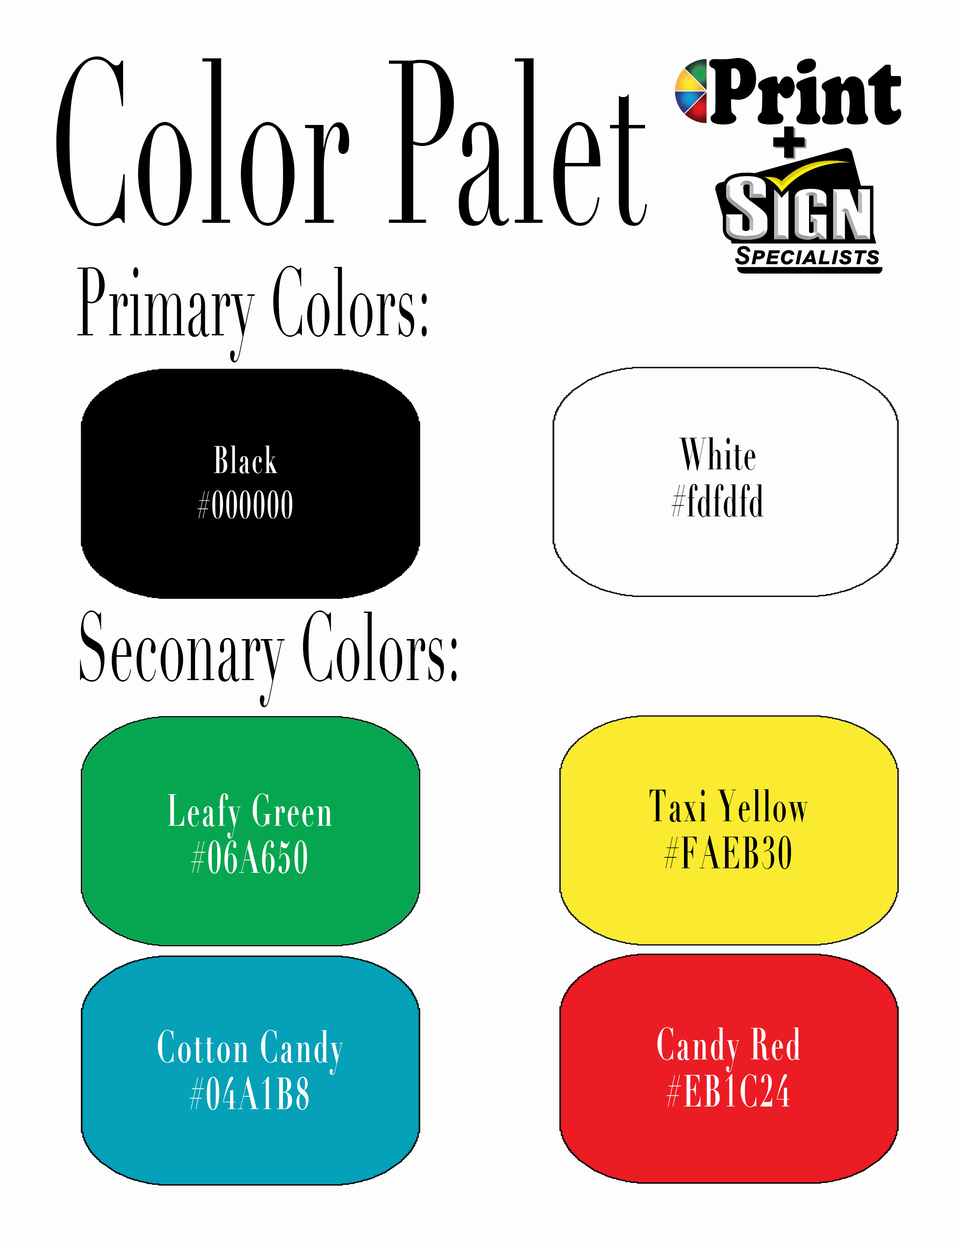
<style>
.page{position:relative;width:960px;height:1242px;background:#fdfdfd}
.page>*{position:absolute;margin:0}
.t1{font:228.1px "Didot";letter-spacing:0.02em;color:#000000;scale:0.5 1}
.t2{font:95px "Didot";letter-spacing:0.02em;color:#000000;scale:0.5 1}
.t3{font:44.4px/47.1px "Didot-Bold";letter-spacing:0.04em;color:#000000;scale:0.57 1}
.t4{font:38px "Didot-Bold";letter-spacing:0.08em;color:#ffffff;scale:0.57 1}
.t5{font:44.4px/47.1px "Didot-Bold";letter-spacing:0.08em;color:#ffffff;scale:0.57 1}
.t6{font:44.4px/47.1px "Didot-Bold";letter-spacing:0.08em;color:#000000;scale:0.57 1}
</style>
<div class="page">
<p class="t1" style="left:56px;top:56px;width:591px;height:170px">Color Palet</p>
<p class="t2" style="left:77px;top:266px;width:350px;height:97px">Primary Colors:</p>
<p class="t3" style="left:671px;top:437px;width:92px;height:80px;text-align:center">White<br>#fdfdfd</p>
<p class="t4" style="left:197px;top:446px;width:95px;height:73px;text-align:center">Black<br><br>#000000</p>
<p class="t2" style="left:80px;top:611px;width:377px;height:96px">Seconary Colors:</p>
<p class="t5" style="left:168px;top:794px;width:164px;height:80px;text-align:center">Leafy Green<br>#06A650</p>
<p class="t6" style="left:649px;top:789px;width:159px;height:80px;text-align:center">Taxi Yellow<br>#FAEB30</p>
<p class="t5" style="left:158px;top:1030px;width:185px;height:80px;text-align:center">Cotton Candy<br>#04A1B8</p>
<p class="t5" style="left:657px;top:1027px;width:143px;height:80px;text-align:center">Candy Red<br>#EB1C24</p>
</div>
